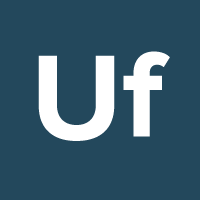
<style>
.page{position:relative;width:200px;height:200px;background:#23485c}
.page>*{position:absolute;margin:0}
.t1{font:125px "ProximaNova-Bold";color:#ffffff}
</style>
<div class="page">
<p class="t1" style="left:123px;top:51px;width:47px;height:86px">f</p>
<p class="t1" style="left:38px;top:55px;width:77px;height:86px">U</p>
</div>
